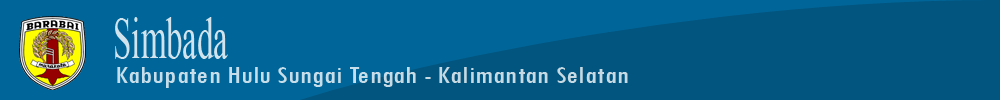
<style>
.page{position:relative;width:1000px;height:100px;background:#006699}
.page>*{position:absolute;margin:0}
.t1{font:58.7px "TimesNewRomanPSMT";color:#d1e3ed;scale:0.56 1}
.t2{font:24.5px "TwCenMT-Condensed";color:#c7dde9;scale:1.36 1}
</style>
<div class="page">
<p class="t1" style="left:115px;top:17px;width:113px;height:42px">Simbada</p>
<p class="t2" style="left:117px;top:67px;width:511px;height:21px">Kabupaten Hulu Sungai Tengah - Kalimantan Selatan</p>
</div>
